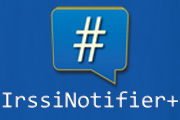
<style>
.page{position:relative;width:180px;height:120px}
.page>*{position:absolute;margin:0}
.t1{font:23px "Consolas"}
</style>
<div class="page">
<p class="t1" style="left:2px;top:91px;width:176px;height:17px">IrssiNotifier+</p>
</div>
